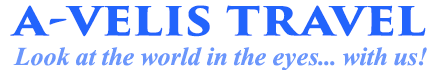
<style>
.page{position:relative;width:440px;height:70px;background:#ffffff}
.page>*{position:absolute;margin:0}
.t1{font:45px "TrajanPro3-Bold";color:#2264fc;scale:1.12 1}
.t2{font:26px "TimesNewRomanPS-BoldItalicMT";color:#6b97fc}
</style>
<div class="page">
<p class="t1" style="left:10px;top:5px;width:416px;height:32px">a-velis travel</p>
<p class="t2" style="left:13px;top:47px;width:414px;height:24px">Look at the world in the eyes... with us!</p>
</div>
